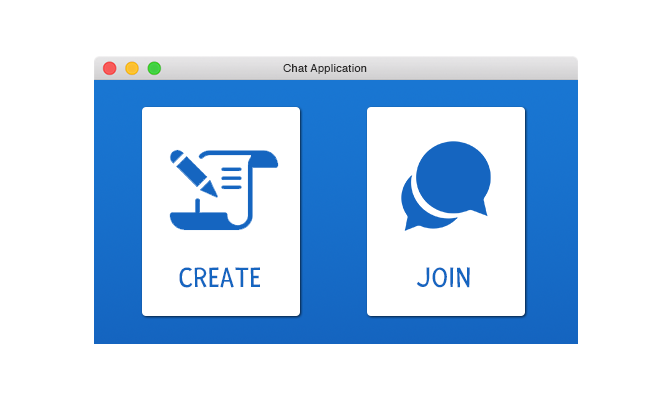
<style>
.page{position:relative;width:672px;height:400px;background:#ffffff}
.page>*{position:absolute;margin:0}
.t1{font:11px "Helvetica";letter-spacing:0.025em;color:#292828}
.t2{font:30px "Fresca-Regular";letter-spacing:0.025em;color:#1565c0}
</style>
<div class="page">
<p class="t1" style="left:283px;top:64px;width:84px;height:10px">Chat Application</p>
<p class="t2" style="left:179px;top:267px;width:81px;height:21px">CREATE</p>
<p class="t2" style="left:416px;top:267px;width:54px;height:21px">JOIN</p>
</div>
